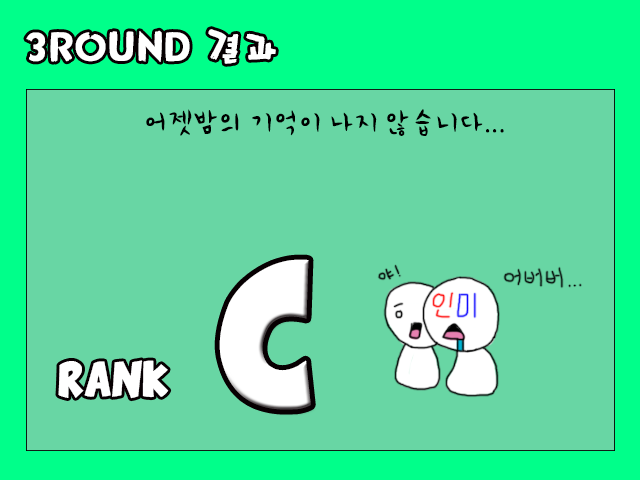
<style>
.page{position:relative;width:640px;height:480px;background:#68d6a4}
.page>*{position:absolute;margin:0}
.t1{font:36px "Mpop";color:#ffffff}
.t2{font:30px "PNHCartoon";color:#000000}
.t3{font:100px "ComixLoud";color:#ffffff}
.t4{font:24px "ComixLoud";color:#ffffff}
</style>
<div class="page">
<p class="t1" style="left:26px;top:29px;width:250px;height:35px">3ROUND 결과</p>
<p class="t2" style="left:146px;top:109px;width:358px;height:27px">어젯밤의 기억이 나지 않습니다...</p>
<p class="t3" style="left:219px;top:259px;width:92px;height:151px">C</p>
<p class="t4" style="left:58px;top:360px;width:111px;height:39px">RANK</p>
</div>
